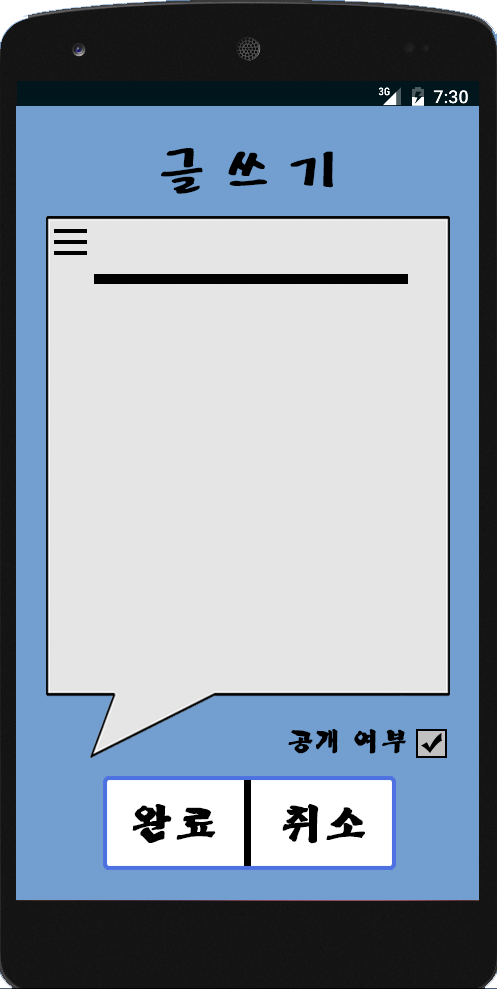
<style>
.page{position:relative;width:497px;height:989px;background:#e5e5e5}
.page>*{position:absolute;margin:0}
.t1{font:60px "HYbdaM";letter-spacing:0.07em;color:#000000;font-weight:bold}
.t2{font:25px "Yj-BACDOO-Bold";letter-spacing:0.07em;color:#000000;font-weight:bold}
.t3{font:40px "Yj-BACDOO-Bold";letter-spacing:0.07em;color:#000000;font-weight:bold}
</style>
<div class="page">
<p class="t1" style="left:161px;top:148px;width:172px;height:46px">글쓰기</p>
<p class="t2" style="left:288px;top:729px;width:118px;height:25px">공개 여부</p>
<p class="t3" style="left:132px;top:804px;width:84px;height:39px">완료</p>
<p class="t3" style="left:282px;top:804px;width:83px;height:40px">취소</p>
</div>
